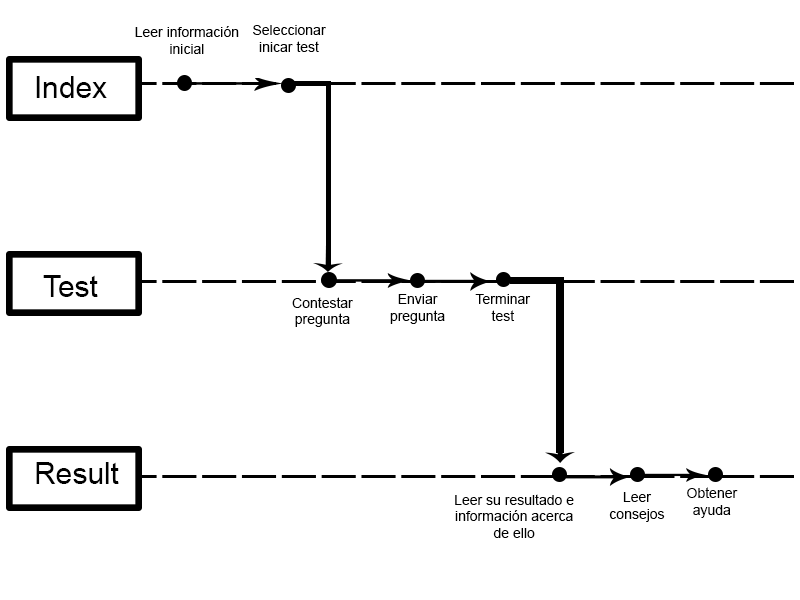
<style>
.page{position:relative;width:800px;height:600px;background:#ffffff}
.page>*{position:absolute;margin:0}
.t1{font:14px "ArialMT";color:#000000}
.t2{font:30px "ArialMT";color:#000000}
</style>
<div class="page">
<p class="t1" style="left:135px;top:26px;width:104px;height:28px;text-align:center">Leer información inicial</p>
<p class="t1" style="left:253px;top:25px;width:73px;height:27px;text-align:center">Seleccionar inicar test</p>
<p class="t2" style="left:36px;top:76px;width:71px;height:22px">Index</p>
<p class="t2" style="left:43px;top:275px;width:55px;height:22px">Test</p>
<p class="t1" style="left:390px;top:294px;width:55px;height:30px;text-align:center">Enviar <br>pregunta</p>
<p class="t1" style="left:475px;top:294px;width:56px;height:27px;text-align:center">Terminar test</p>
<p class="t1" style="left:292px;top:297px;width:61px;height:30px;text-align:center">Contestar <br>pregunta</p>
<p class="t2" style="left:36px;top:462px;width:83px;height:22px">Result</p>
<p class="t1" style="left:455px;top:494px;width:119px;height:44px;text-align:center">Leer su resultado e información acerca de ello</p>
<p class="t1" style="left:609px;top:492px;width:56px;height:30px;text-align:center">Leer consejos</p>
<p class="t1" style="left:687px;top:487px;width:51px;height:31px;text-align:center">Obtener ayuda</p>
</div>
